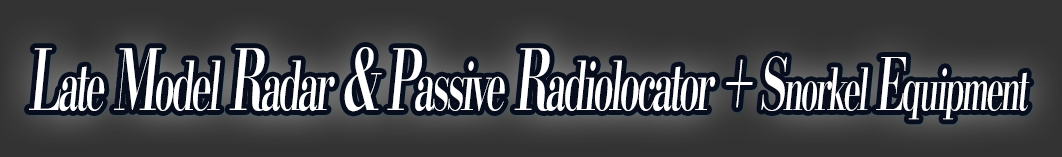
<style>
.page{position:relative;width:1062px;height:157px;background:#333333}
.page>*{position:absolute;margin:0}
.t1{font:67.2px "KochoStd-Heavy";letter-spacing:-0.08em;color:#ffffff;font-style:italic;scale:0.55 1}
.t2{font:84px "KochoStd-Heavy";letter-spacing:-0.08em;color:#ffffff;font-style:italic;scale:0.55 1}
.t3{font:72px "KochoStd-Heavy";letter-spacing:-0.08em;color:#ffffff;font-style:italic;scale:0.55 1}
.t4{font:57.6px "KochoStd-Heavy";letter-spacing:-0.08em;color:#ffffff;font-style:italic;scale:0.55 1}
</style>
<div class="page">
<p class="t1" style="left:29px;top:47px;width:1001px;height:73px"><span class="t2">L</span>ate<span class="t2"> M</span>odel<span class="t2"> R</span>adar<span class="t2"> &amp; P</span>assive<span class="t2"> R</span>adiolocator <span class="t3">+ S</span><span class="t4">norkel</span><span class="t3"> E</span><span class="t4">quipment</span></p>
</div>
